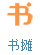
<style>
.page{position:relative;width:40px;height:55px;background:#ffffff}
.page>*{position:absolute;margin:0}
.t1{font:21.2px "SimSun";letter-spacing:0.075em;color:#4788b2;font-variant:small-caps}
</style>
<div class="page">
<p class="t1" style="left:8px;top:39px;width:24px;height:12px">书摊</p>
</div>
